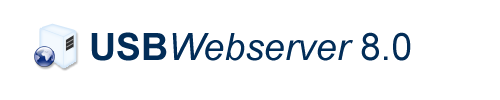
<style>
.page{position:relative;width:500px;height:100px;background:#ffffff}
.page>*{position:absolute;margin:0}
.t1{font:37.5px "Arial-ItalicMT";color:#022d58}
.t2{font:37.5px "Arial-BoldMT";color:#022d58}
.t3{font:37.5px "ArialMT";color:#022d58}
</style>
<div class="page">
<p class="t1" style="left:91px;top:32px;width:320px;height:29px"><span class="t2">USB</span>Webserver<span class="t3"> 8.0</span></p>
</div>
